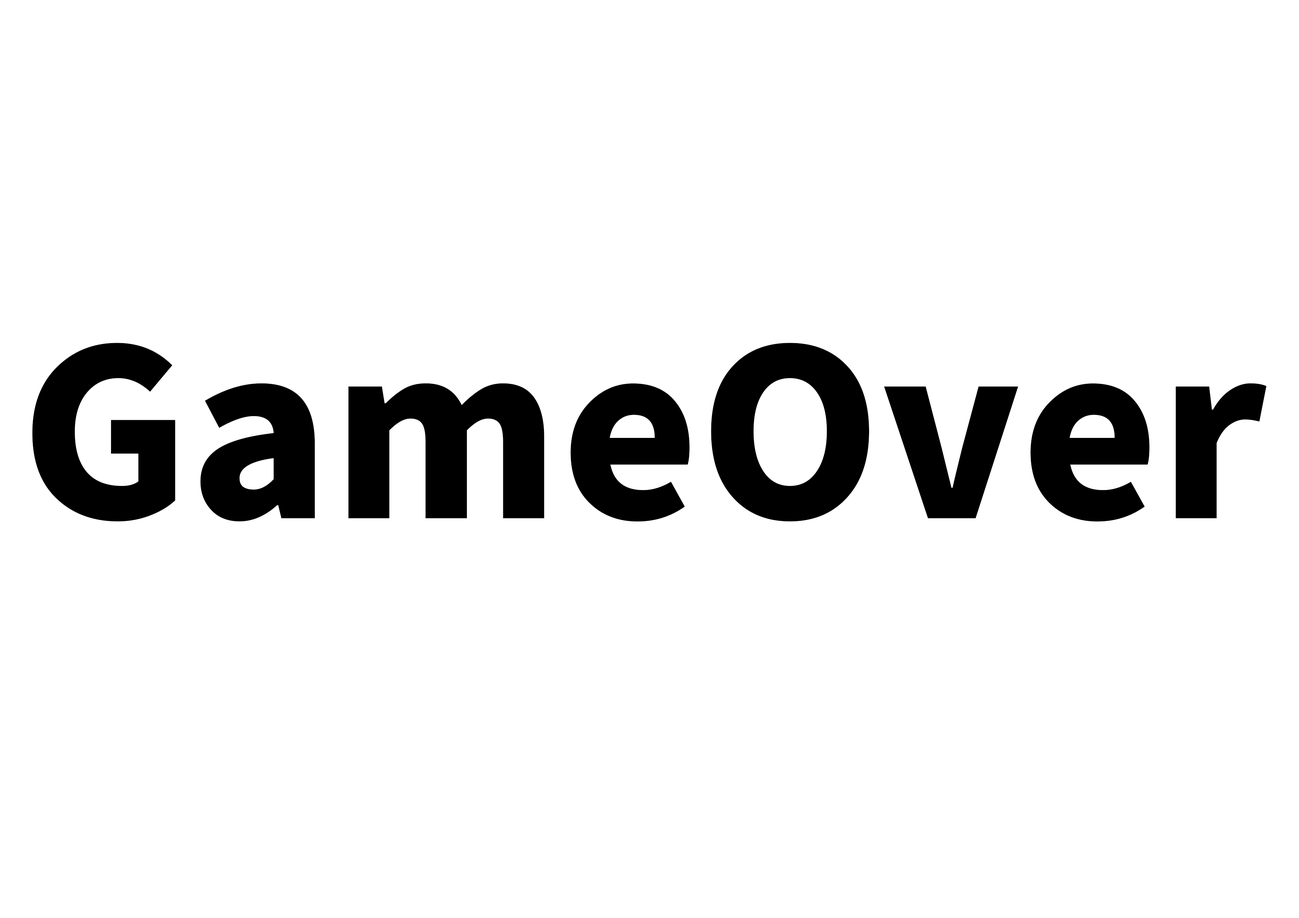
<style>
.page{position:relative;width:1299px;height:918px;background:#ffffff}
.page>*{position:absolute;margin:0}
.t1{font:231.4px "Keifont";color:#000000}
</style>
<div class="page">
<p class="t1" style="left:32px;top:343px;width:1234px;height:179px">GameOver</p>
</div>
